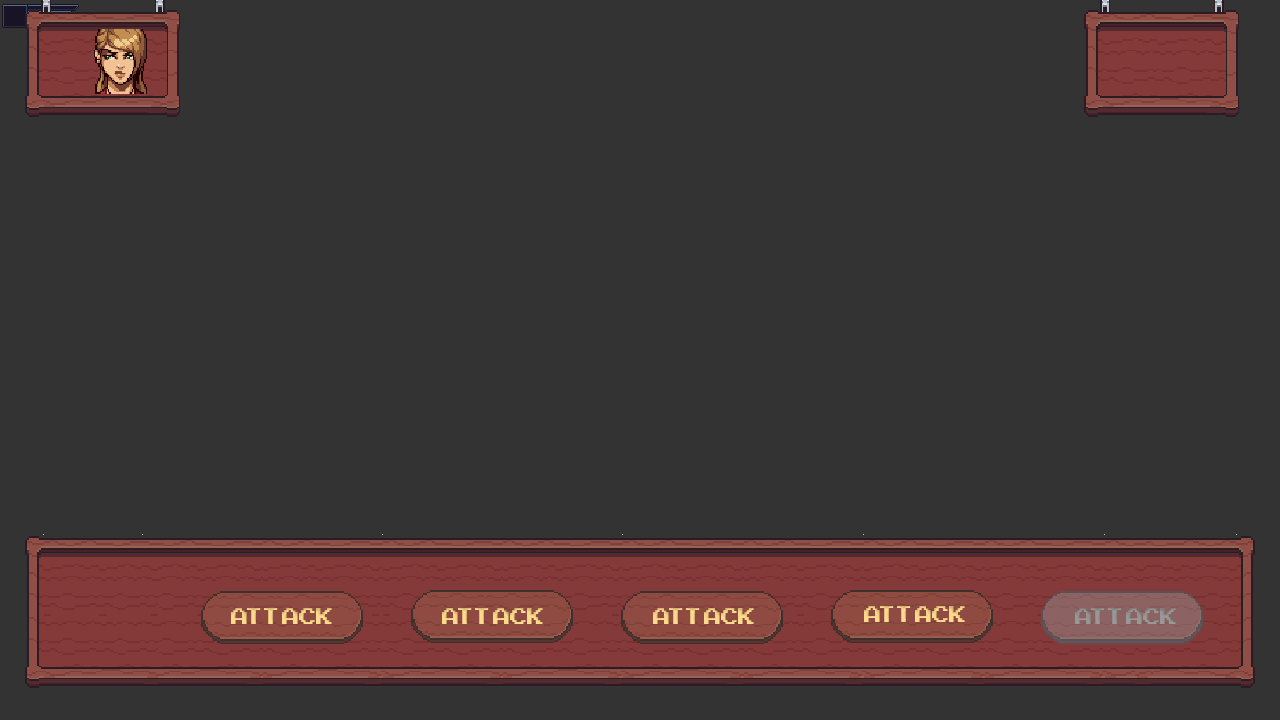
<style>
.page{position:relative;width:1280px;height:720px;background:#333333}
.page>*{position:absolute;margin:0}
.t1{font:31px "ArcadeClassic";color:#fcd78a}
.t2{font:31px "ArcadeClassic";color:#969695}
</style>
<div class="page">
<p class="t1" style="left:864px;top:606px;width:101px;height:16px">Attack</p>
<p class="t1" style="left:231px;top:608px;width:101px;height:16px">Attack</p>
<p class="t1" style="left:442px;top:608px;width:101px;height:16px">Attack</p>
<p class="t1" style="left:653px;top:608px;width:101px;height:16px">Attack</p>
<p class="t2" style="left:1075px;top:608px;width:101px;height:16px">Attack</p>
</div>
